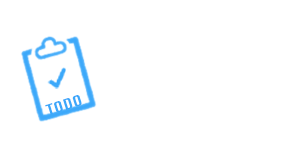
<style>
.page{position:relative;width:300px;height:150px;background:#ffffff}
.page>*{position:absolute;margin:0}
.t1{font:14.8px "Silom";color:#3ba7fa}
</style>
<div class="page">
<p class="t1" style="left:45px;top:95px;width:37px;height:20px;rotate:-18deg">TODO</p>
</div>
